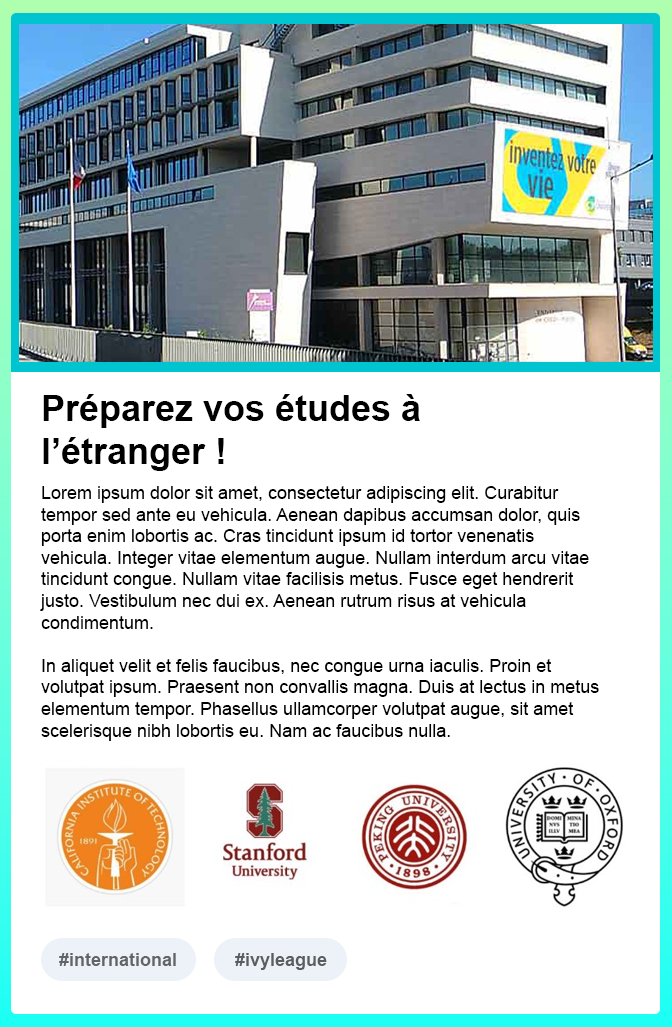
<style>
.page{position:relative;width:672px;height:1027px;background:#ffffff}
.page>*{position:absolute;margin:0}
.t1{font:36px "Arial-BoldMT";color:#000000}
.t2{font:18px "ArialMT";color:#000000}
.t3{font:18px "Arial-BoldMT";color:#616466}
.t4{font:18px "Arial-BoldMT";color:#5b5d5f}
</style>
<div class="page">
<p class="t1" style="left:43px;top:394px;width:377px;height:77px">Préparez vos études à l’étranger !</p>
<p class="t2" style="left:40px;top:486px;width:559px;height:255px">Lorem ipsum dolor sit amet, consectetur adipiscing elit. Curabitur tempor sed ante eu vehicula. Aenean dapibus accumsan dolor, quis porta enim lobortis ac. Cras tincidunt ipsum id tortor venenatis vehicula. Integer vitae elementum augue. Nullam interdum arcu vitae tincidunt congue. Nullam vitae facilisis metus. Fusce eget hendrerit justo. Vestibulum nec dui ex. Aenean rutrum risus at vehicula condimentum. <br><br>In aliquet velit et felis faucibus, nec congue urna iaculis. Proin et volutpat ipsum. Praesent non convallis magna. Duis at lectus in metus elementum tempor. Phasellus ullamcorper volutpat augue, sit amet scelerisque nibh lobortis eu. Nam ac faucibus nulla.</p>
<p class="t3" style="left:59px;top:953px;width:117px;height:13px">#international</p>
<p class="t4" style="left:235px;top:953px;width:92px;height:17px">#ivyleague</p>
</div>
